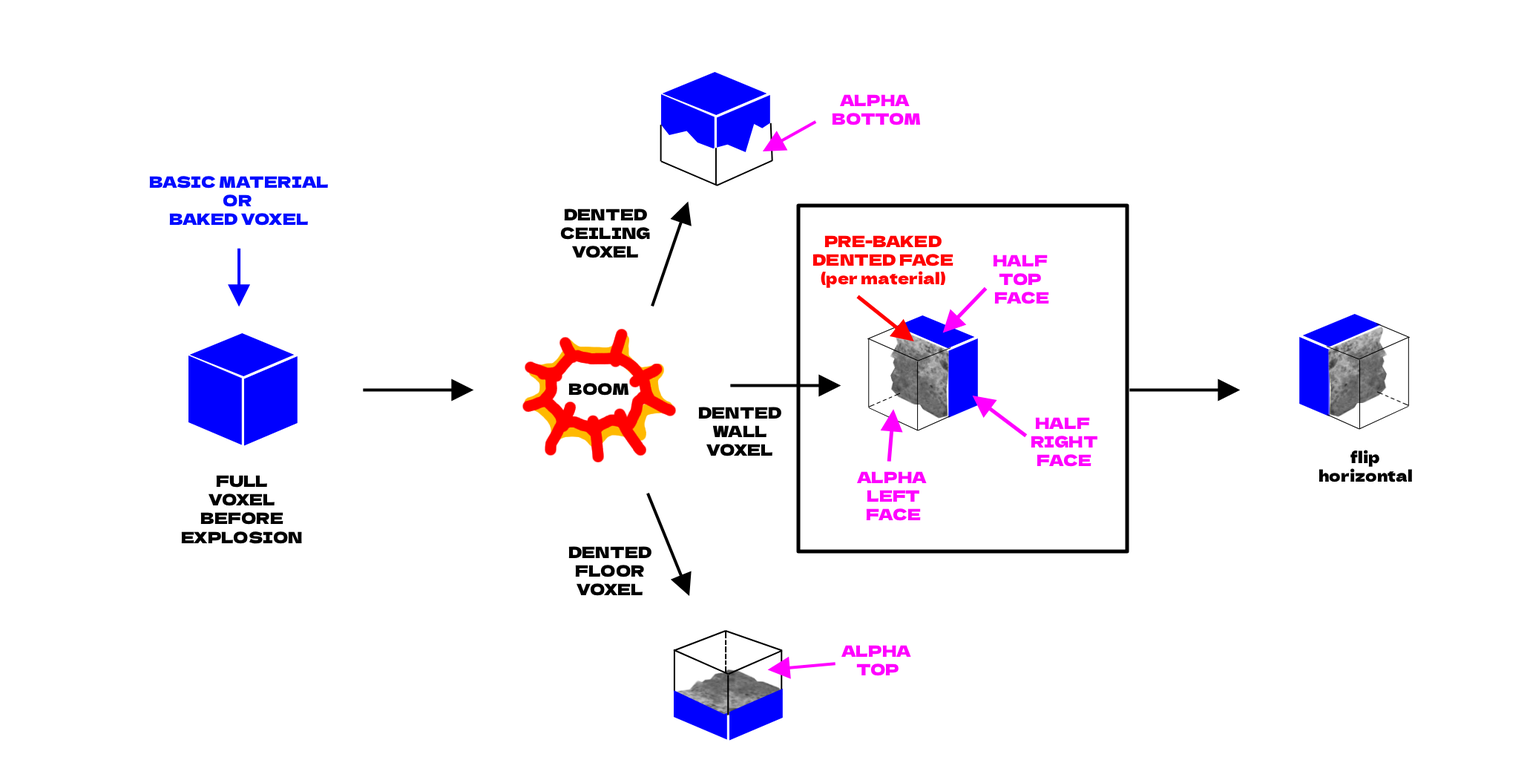
<style>
.page{position:relative;width:1530px;height:780px;background:#ffffff}
.page>*{position:absolute;margin:0}
.t1{font:15.6px "DelaGothicOne-Regular";color:#ff00ff}
.t2{font:15.6px "DelaGothicOne-Regular";color:#000bff}
.t3{font:15.6px "DelaGothicOne-Regular";color:#000000}
.t4{font:15.6px "DelaGothicOne-Regular";color:#ff0000}
</style>
<div class="page">
<p class="t1" style="left:832px;top:94px;width:89px;height:31px;text-align:center">ALPHA <br>BOTTOM</p>
<p class="t2" style="left:149px;top:176px;width:180px;height:49px;text-align:center">BASIC MATERIAL<br>OR <br>BAKED VOXEL</p>
<p class="t3" style="left:560px;top:208px;width:90px;height:50px;text-align:center">DENTED<br>CEILING<br>VOXEL</p>
<p class="t4" style="left:812px;top:235px;width:141px;height:53px;text-align:center">PRE-BAKED<br>DENTED FACE<br>(per material)</p>
<p class="t1" style="left:992px;top:254px;width:57px;height:50px;text-align:center">HALF <br>TOP <br>FACE</p>
<p class="t3" style="left:568px;top:383px;width:61px;height:12px">BOOM</p>
<p class="t3" style="left:698px;top:406px;width:83px;height:50px;text-align:center">DENTED<br>WALL<br>VOXEL</p>
<p class="t1" style="left:1030px;top:417px;width:67px;height:50px;text-align:center">HALF <br>RIGHT<br>FACE</p>
<p class="t3" style="left:1318px;top:450px;width:94px;height:32px;text-align:center">flip<br>horizontal</p>
<p class="t1" style="left:857px;top:471px;width:69px;height:50px;text-align:center">ALPHA <br>LEFT<br>FACE</p>
<p class="t3" style="left:181px;top:475px;width:121px;height:69px;text-align:center">FULL<br>VOXEL<br>BEFORE<br>EXPLOSION</p>
<p class="t3" style="left:568px;top:546px;width:83px;height:50px;text-align:center">DENTED<br>FLOOR<br>VOXEL</p>
<p class="t1" style="left:841px;top:645px;width:70px;height:31px;text-align:center">ALPHA <br>TOP</p>
</div>
